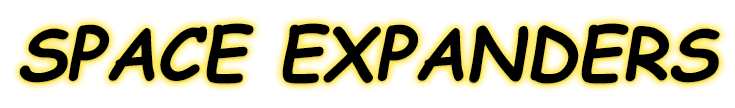
<style>
.page{position:relative;width:735px;height:108px;background:#ffffff}
.page>*{position:absolute;margin:0}
.t1{font:72px "ComicSansMS-BoldItalic";color:#000000}
</style>
<div class="page">
<p class="t1" style="left:19px;top:23px;width:701px;height:61px">SPACE EXPANDERS</p>
</div>
